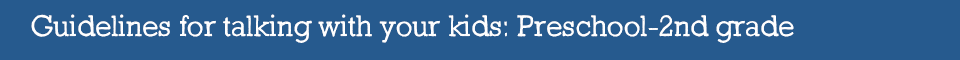
<style>
.page{position:relative;width:960px;height:60px;background:#265a8e}
.page>*{position:absolute;margin:0}
.t1{font:30px "SketchBlockLight";color:#ffffff}
</style>
<div class="page">
<p class="t1" style="left:31px;top:14px;width:763px;height:29px">Guidelines for talking with your kids: Preschool-2nd grade</p>
</div>
